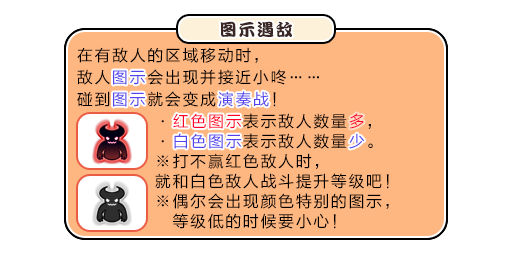
<style>
.page{position:relative;width:512px;height:256px;background:#ffffff}
.page>*{position:absolute;margin:0}
.t1{font:17px "DFPKanTingLiuW9";letter-spacing:0.1em;color:#3b2626}
.t2{font:16px/22px "FZLTHJW--GB1-0";letter-spacing:0.1em;color:#000000}
.t3{font:16px/22px "FZLTHJW--GB1-0";letter-spacing:0.1em;color:#5444ed}
.t4{font:16px "FZLTHJW--GB1-0";letter-spacing:0.1em;color:#5444ed}
.t5{font:16px/20px "FZLTHJW--GB1-0";letter-spacing:0.1em}
.t6{font:16px "FZLTHJW--GB1-0";letter-spacing:0.1em;color:#ff002a}
.t7{font:16px/20px "FZLTHJW--GB1-0";letter-spacing:0.1em;color:#000000}
</style>
<div class="page">
<p class="t1" style="left:220px;top:21px;width:72px;height:16px">图示遇敌</p>
<p class="t2" style="left:77px;top:47px;width:242px;height:60px">在有敌人的区域移动时，<br>敌人<span class="t3">图示</span>会出现并接近小咚……<br>碰到<span class="t3">图示</span>就会变成<span class="t3">演奏战</span>！</p>
<p class="t4" style="left:113px;top:70px;width:32px;height:15px">图示</p>
<p class="t4" style="left:113px;top:92px;width:32px;height:15px">图示</p>
<p class="t4" style="left:218px;top:91px;width:51px;height:16px">演奏战</p>
<p class="t5" style="left:161px;top:113px;width:212px;height:36px">·红色图示表示敌人数量多，<br>·白色图示表示敌人数量少。</p>
<p class="t6" style="left:173px;top:113px;width:69px;height:16px">红色图示</p>
<p class="t6" style="left:349px;top:113px;width:15px;height:16px">多</p>
<p class="t4" style="left:174px;top:133px;width:68px;height:16px">白色图示</p>
<p class="t4" style="left:349px;top:133px;width:16px;height:16px">少</p>
<p class="t7" style="left:155px;top:153px;width:234px;height:76px">※打不赢红色敌人时，<br>就和白色敌人战斗提升等级吧！<br>※偶尔会出现颜色特别的图示，<br>　等级低的时候要小心！</p>
</div>
